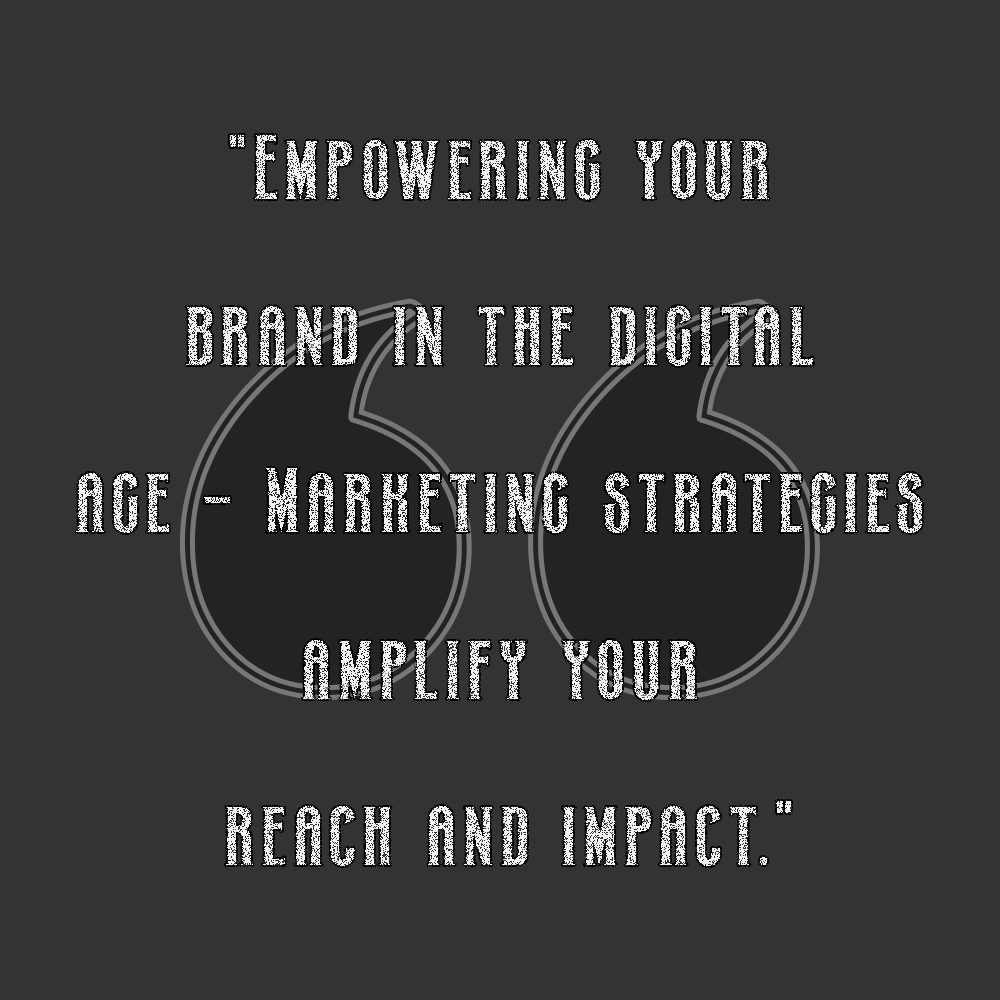
<style>
.page{position:relative;width:1000px;height:1000px;background:#333333}
.page>*{position:absolute;margin:0}
.t1{font:83.3px/166.7px "BatKnight-Regular";letter-spacing:0.1em;color:#f1f1f1}
</style>
<div class="page">
<p class="t1" style="left:76px;top:135px;width:846px;height:731px;text-align:center;opacity:0.75">"Empowering your <br>brand in the digital <br>age – Marketing strategies <br>amplify your <br>reach and impact."</p>
</div>
